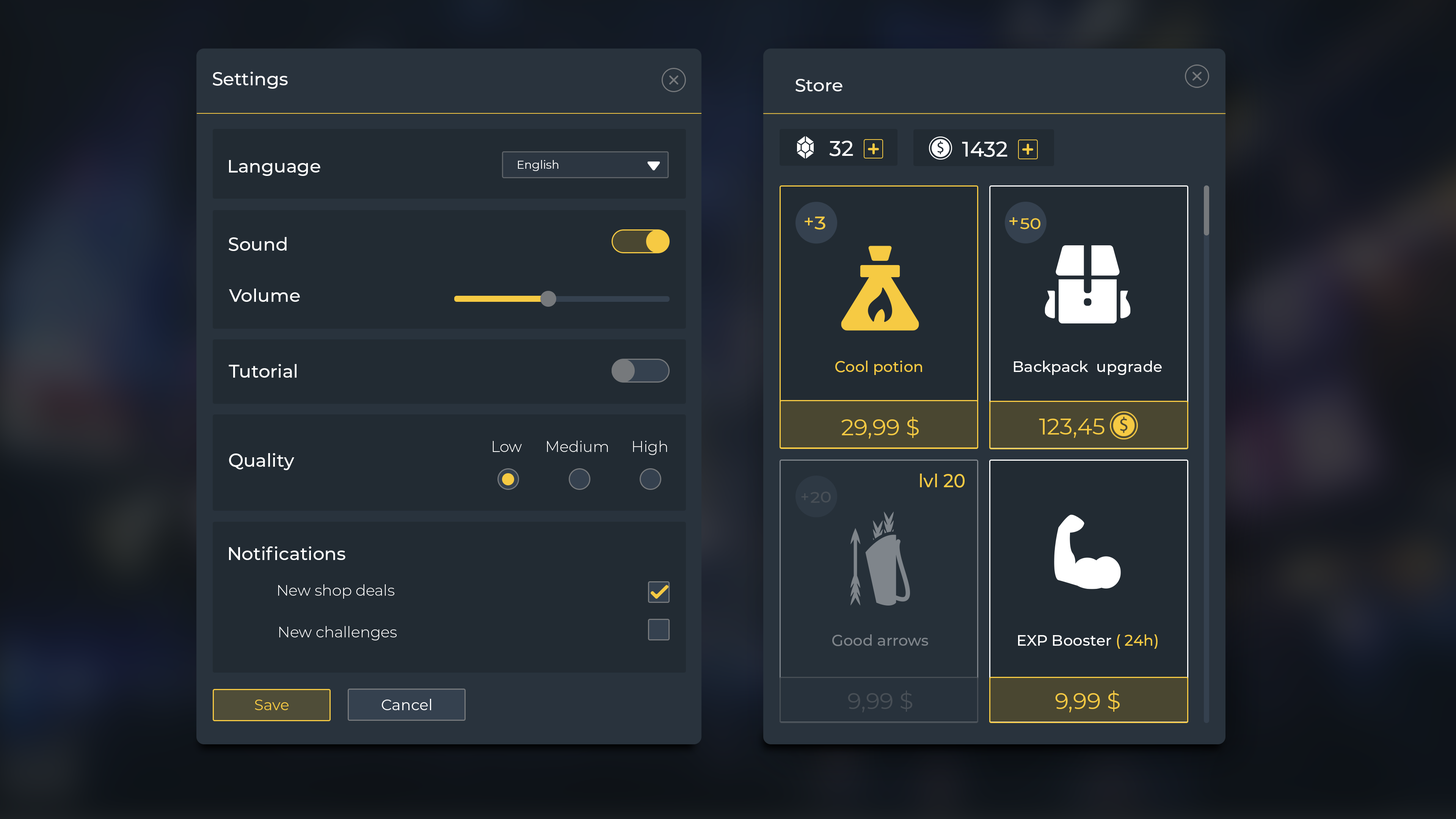
<style>
.page{position:relative;width:1456px;height:819px;background:#222b33}
.page>*{position:absolute;margin:0}
.t1{font:18.2px "Montserrat-Medium";color:#ffffff}
.t2{font:17.3px "Montserrat-Medium";color:#ffffff;scale:1.05 1}
.t3{font:21.2px "Montserrat-Medium";color:#ffffff}
.t4{font:21.1px "Montserrat-Medium";color:#ffffff}
.t5{font:18.1px "Montserrat-Medium";color:#ffffff}
.t6{font:11.4px "Montserrat-Regular";color:#ffffff}
.t7{font:18.2px "Montserrat-Medium";color:#f6ca43}
.t8{font:18.2px "Montserrat-Medium";color:#f6ca43;scale:1.13 1}
.t9{font:15.2px "Montserrat-Medium";color:#f6ca43;scale:1.13 1}
.t10{font:15.2px "Montserrat-Medium";color:#f6ca43}
.t11{font:15.2px "Montserrat-Medium";color:#ffffff}
.t12{font:22.8px "Montserrat-Regular";color:#f6ca43}
.t13{font:22.7px "Montserrat-Regular";color:#f6ca43}
.t14{font:15.2px "Montserrat-Light";color:#ffffff}
.t15{font:15.2px "Montserrat-Medium";color:#484f56}
.t16{font:15.2px "Montserrat-Medium";color:#484f56;scale:1.13 1}
.t17{font:15.2px "Montserrat-Medium";color:#7f858b}
.t18{font:15.2px "Montserrat-Regular";color:#f6ca43}
.t19{font:15.2px "Montserrat-Regular";color:#ffffff}
.t20{font:22.7px "Montserrat-Regular";color:#484f56}
</style>
<div class="page">
<p class="t1" style="left:213px;top:72px;width:75px;height:17px">Settings</p>
<p class="t2" style="left:795px;top:79px;width:47px;height:13px">Store</p>
<p class="t3" style="left:829px;top:141px;width:24px;height:15px">32</p>
<p class="t4" style="left:962px;top:141px;width:45px;height:16px">1432</p>
<p class="t5" style="left:229px;top:160px;width:91px;height:16px">Language</p>
<p class="t6" style="left:518px;top:160px;width:41px;height:11px">English</p>
<p class="t7" style="left:805px;top:218px;width:8px;height:8px">+</p>
<p class="t8" style="left:814px;top:217px;width:11px;height:13px">3</p>
<p class="t7" style="left:1009px;top:217px;width:9px;height:8px">+</p>
<p class="t9" style="left:1020px;top:218px;width:20px;height:11px">50</p>
<p class="t1" style="left:229px;top:237px;width:58px;height:14px">Sound</p>
<p class="t5" style="left:229px;top:289px;width:71px;height:13px">Volume</p>
<p class="t1" style="left:229px;top:364px;width:68px;height:14px">Tutorial</p>
<p class="t10" style="left:835px;top:361px;width:87px;height:14px">Cool potion</p>
<p class="t11" style="left:1014px;top:361px;width:148px;height:14px">Backpack  upgrade</p>
<p class="t12" style="left:841px;top:417px;width:78px;height:22px">29,99 $</p>
<p class="t13" style="left:1039px;top:419px;width:65px;height:19px">123,45</p>
<p class="t14" style="left:493px;top:441px;width:29px;height:11px">Low</p>
<p class="t14" style="left:547px;top:441px;width:61px;height:11px">Medium</p>
<p class="t14" style="left:633px;top:441px;width:34px;height:14px">High</p>
<p class="t1" style="left:229px;top:453px;width:65px;height:17px">Quality</p>
<p class="t7" style="left:920px;top:474px;width:45px;height:14px">lvl 20</p>
<p class="t15" style="left:801px;top:493px;width:7px;height:7px">+</p>
<p class="t16" style="left:810px;top:491px;width:21px;height:12px">20</p>
<p class="t1" style="left:229px;top:546px;width:116px;height:14px">Notifications</p>
<p class="t14" style="left:278px;top:584px;width:116px;height:15px">New shop deals</p>
<p class="t14" style="left:279px;top:626px;width:118px;height:14px">New challenges</p>
<p class="t17" style="left:832px;top:634px;width:96px;height:12px">Good arrows</p>
<p class="t11" style="left:1018px;top:634px;width:140px;height:15px">EXP Booster <span class="t10">( 24h)</span></p>
<p class="t18" style="left:255px;top:700px;width:34px;height:10px">Save</p>
<p class="t19" style="left:382px;top:699px;width:49px;height:11px">Cancel</p>
<p class="t20" style="left:848px;top:690px;width:64px;height:22px">9,99 $</p>
<p class="t12" style="left:1055px;top:690px;width:65px;height:22px">9,99 $</p>
</div>
